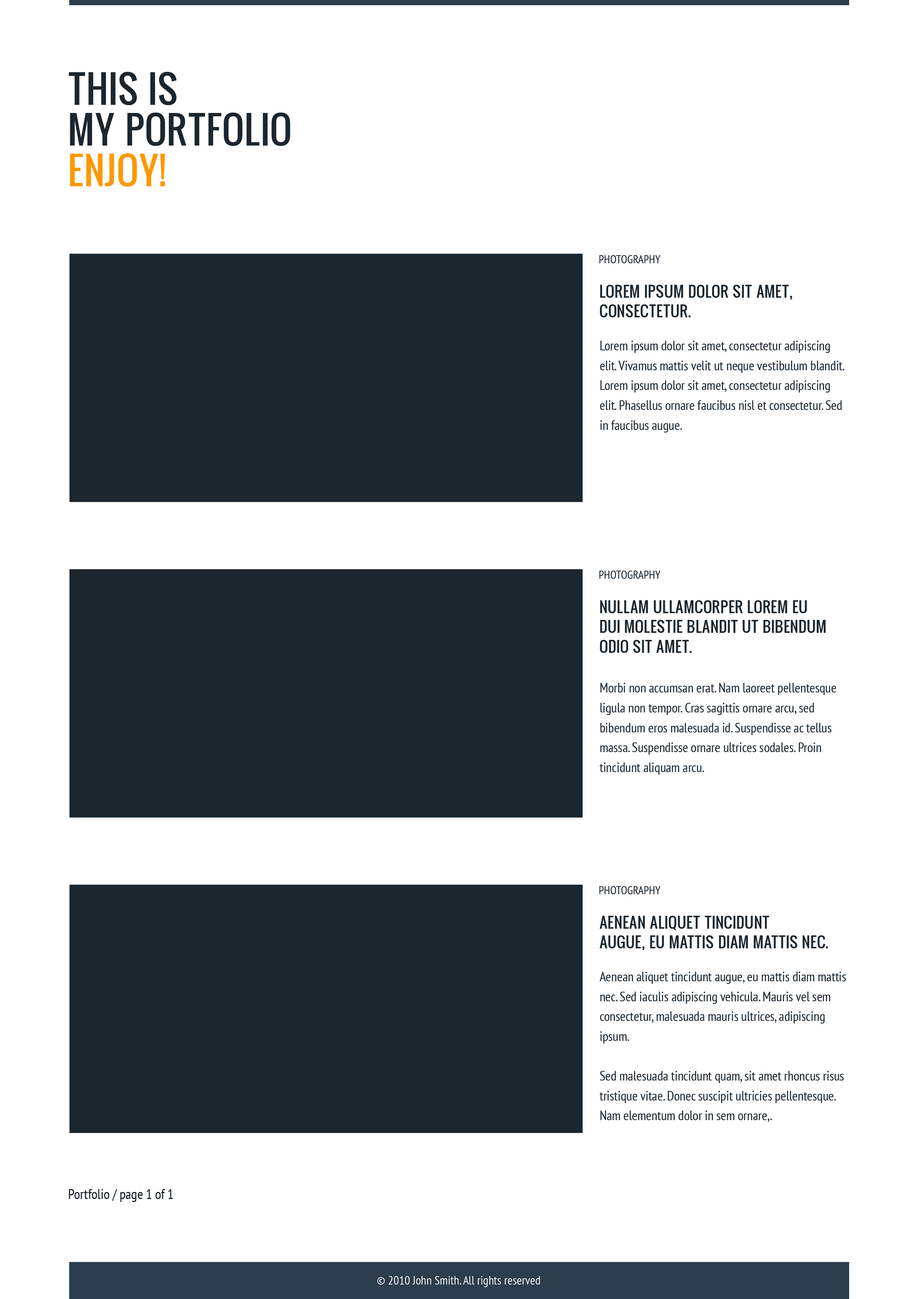
<style>
.page{position:relative;width:918px;height:1299px;background:#ffffff}
.page>*{position:absolute;margin:0}
.t1{font:37px/40.6px "Oswald";color:#1b262f;text-transform:uppercase}
.t2{font:37px/40.6px "Oswald";color:#ff9800;text-transform:uppercase}
.t3{font:11.6px "PTSans-Narrow";color:#1b262f;text-transform:uppercase}
.t4{font:14.9px/19.9px "Oswald";color:#1b262f;text-transform:uppercase}
.t5{font:13.2px/19.9px "PTSans-Narrow";color:#1b262f}
.t6{font:13.9px "PTSans-Narrow";color:#1b262f}
.t7{font:12.3px "PTSans-Narrow";color:#ffffff}
</style>
<div class="page">
<p class="t1" style="left:69px;top:72px;width:221px;height:115px">this is <br>my portfolio<br><span class="t2">enjoy!</span></p>
<p class="t3" style="left:599px;top:255px;width:61px;height:8px">photography</p>
<p class="t4" style="left:600px;top:285px;width:192px;height:32px">Lorem ipsum dolor sit amet, <br>consectetur.</p>
<p class="t5" style="left:600px;top:341px;width:244px;height:91px">Lorem ipsum dolor sit amet, consectetur adipiscing elit. Vivamus mattis velit ut neque vestibulum blandit. Lorem ipsum dolor sit amet, consectetur adipiscing elit. Phasellus ornare faucibus nisl et consectetur. Sed in faucibus augue.</p>
<p class="t3" style="left:599px;top:571px;width:61px;height:8px">photography</p>
<p class="t4" style="left:600px;top:600px;width:226px;height:53px">Nullam ullamcorper lorem eu <br>dui molestie blandit Ut bibendum <br>odio sit amet.</p>
<p class="t5" style="left:600px;top:683px;width:236px;height:92px">Morbi non accumsan erat. Nam laoreet pellentesque ligula non tempor. Cras sagittis ornare arcu, sed bibendum eros malesuada id. Suspendisse ac tellus massa. Suspendisse ornare ultrices sodales. Proin tincidunt aliquam arcu.</p>
<p class="t3" style="left:599px;top:886px;width:61px;height:8px">photography</p>
<p class="t4" style="left:600px;top:916px;width:228px;height:34px">Aenean aliquet tincidunt <br>augue, eu mattis diam mattis nec.</p>
<p class="t5" style="left:600px;top:971px;width:246px;height:151px">Aenean aliquet tincidunt augue, eu mattis diam mattis nec. Sed iaculis adipiscing vehicula. Mauris vel sem consectetur, malesuada mauris ultrices, adipiscing ipsum. <br><br>Sed malesuada tincidunt quam, sit amet rhoncus risus tristique vitae. Donec suscipit ultricies pellentesque. Nam elementum dolor in sem ornare,.</p>
<p class="t6" style="left:69px;top:1189px;width:104px;height:13px">Portfolio / page 1 of 1</p>
<p class="t7" style="left:377px;top:1276px;width:163px;height:11px">© 2010 John Smith. All rights reserved</p>
</div>
